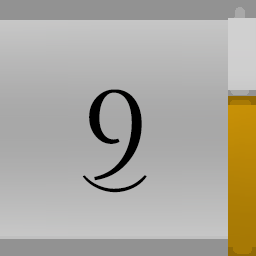
<style>
.page{position:relative;width:256px;height:256px}
.page>*{position:absolute;margin:0}
.t1{font:138.5px "STKaiti";color:#000000}
.t2{font:72px "STKaiti";color:#000000}
</style>
<div class="page">
<p class="t1" style="left:89px;top:89px;width:53px;height:92px">9</p>
<p class="t2" style="left:82px;top:175px;width:65px;height:18px">)</p>
</div>
